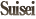
<style>
.page{position:relative;width:36px;height:19px;background:#ffffff}
.page>*{position:absolute;margin:0}
.t1{font:18px "RyuminPro-ExBold";letter-spacing:-0.12em;color:#4a3f32;font-weight:bold;scale:0.85 1}
</style>
<div class="page">
<p class="t1" style="left:0px;top:1px;width:36px;height:15px">Suisei</p>
</div>
